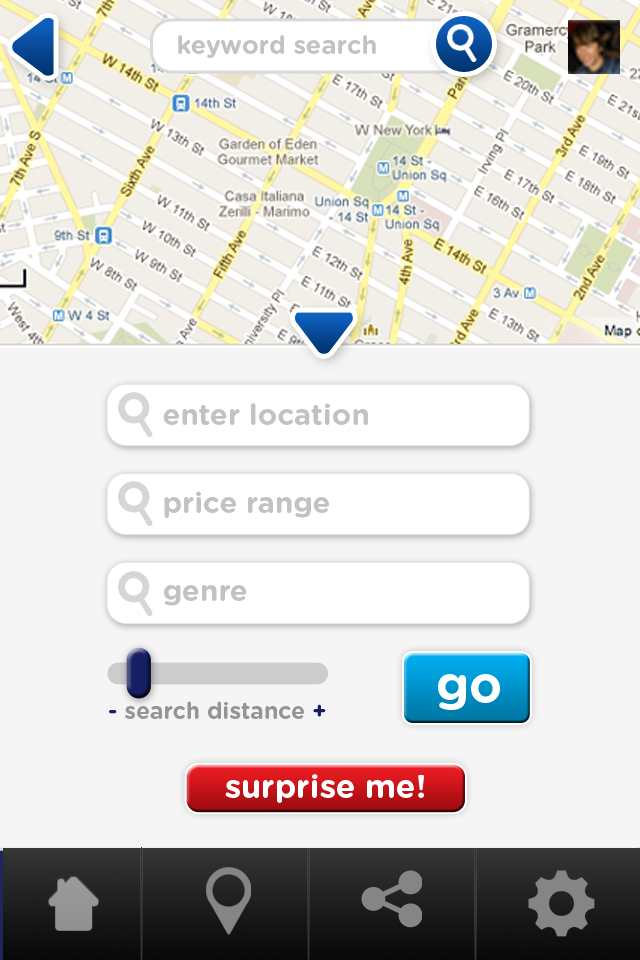
<style>
.page{position:relative;width:640px;height:960px;background:#f6f5f5}
.page>*{position:absolute;margin:0}
.t1{font:25.3px "GothamRounded-Bold";color:#c2c2c2}
.t2{font:29.2px/88px "GothamRounded-Bold";color:#c2c2c2}
.t3{font:49.5px "GothamRounded-Bold";color:#ffffff}
.t4{font:23px "GothamRounded-Bold";color:#959595}
.t5{font:23px "GothamRounded-Bold";color:#171f64}
.t6{font:32.3px "GothamRounded-Bold";color:#ffffff}
</style>
<div class="page">
<p class="t1" style="left:178px;top:35px;width:198px;height:23px">keyword search</p>
<p class="t2" style="left:163px;top:403px;width:205px;height:203px">enter location<br>price range<br>genre</p>
<p class="t3" style="left:438px;top:674px;width:62px;height:36px">go</p>
<p class="t4" style="left:109px;top:701px;width:217px;height:18px"><span class="t5">-</span> search distance <span class="t5">+</span></p>
<p class="t6" style="left:225px;top:774px;width:199px;height:29px">surprise me!</p>
</div>
